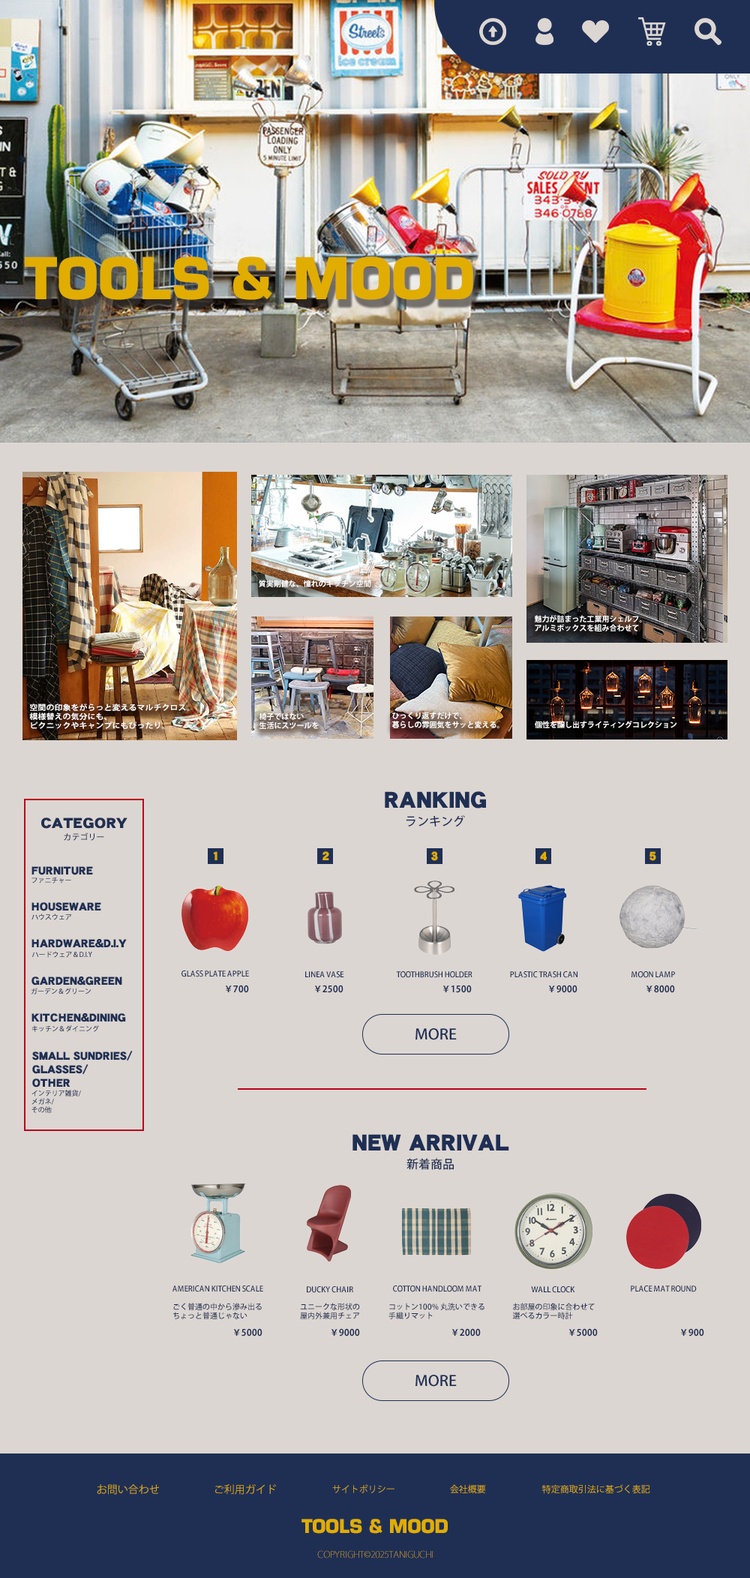
<style>
.page{position:relative;width:750px;height:1578px;background:#dcd6d2}
.page>*{position:absolute;margin:0}
.t1{font:56.3px "Eurostile-Bold";color:#e1ad01;text-transform:uppercase}
.t2{font:7.5px "KozGoPr6N-Bold";color:#ffffff;text-transform:uppercase}
.t3{font:7.5px "KozGoPr6N-Bold";color:#ffffff;text-transform:uppercase;scale:1.09 1}
.t4{font:22.5px "DFGothic-UB-WING-RKSJ-H";color:#1f2f54;text-transform:uppercase}
.t5{font:14.3px "DFGothic-UB-WING-RKSJ-H";color:#212f50;text-transform:uppercase;scale:1.09 1}
.t6{font:12px "KozGoPr6N-Medium";color:#1f2f54;text-transform:uppercase}
.t7{font:8.2px "KozGoPr6N-Medium";color:#1f2f54;text-transform:uppercase}
.t8{font:12px "DFGothic-UB-WING-RKSJ-H";color:#e1ad01;text-transform:uppercase}
.t9{font:11.2px "DFGothic-UB-WING-RKSJ-H";color:#1f2f54;text-transform:uppercase}
.t10{font:6.8px "KozGoPr6N-Medium";color:#1f2f54;text-transform:uppercase}
.t11{font:7.5px "KozGoPr6N-Medium";color:#1f2f54;text-transform:uppercase}
.t12{font:9px "KozGoPr6N-Bold";color:#1f2f54;text-transform:uppercase}
.t13{font:14.5px "KozGoPr6N-Medium";color:#1f2f54;text-transform:uppercase;scale:1.06 1}
.t14{font:10.5px "KozGoPr6N-Regular";color:#e1ad01;text-transform:uppercase}
.t15{font:9px "KozGoPr6N-Regular";color:#e1ad01;text-transform:uppercase}
.t16{font:18.3px "Eurostile-Bold";color:#e1ad01;text-transform:uppercase}
.t17{font:9px "KozGoPr6N-ExtraLight";text-transform:uppercase}
</style>
<div class="page">
<p class="t1" style="left:25px;top:256px;width:448px;height:44px">tools &amp; mood</p>
<p class="t2" style="left:259px;top:580px;width:111px;height:7px">質実剛健な、憧れのキッチン空間</p>
<p class="t2" style="left:535px;top:615px;width:107px;height:17px">魅力が詰まった工業用シェルフ。<br>アルミボックスを組み合わせて</p>
<p class="t3" style="left:29px;top:704px;width:160px;height:25px">空間の印象をがらっと変えるマルチクロス。<br>模様替えの気分にも、<br>ピクニックやキャンプにもぴったり。</p>
<p class="t2" style="left:259px;top:712px;width:60px;height:17px">椅子ではない<br>生活にスツールを</p>
<p class="t2" style="left:392px;top:712px;width:108px;height:17px">ひっくり返すだけで、<br>暮らしの雰囲気をサッと変える。</p>
<p class="t2" style="left:535px;top:721px;width:142px;height:7px">個性を醸し出すライティングコレクション</p>
<p class="t4" style="left:385px;top:791px;width:101px;height:17px">RANKING</p>
<p class="t5" style="left:41px;top:818px;width:87px;height:11px">category</p>
<p class="t6" style="left:406px;top:815px;width:59px;height:12px">ランキング</p>
<p class="t7" style="left:64px;top:832px;width:40px;height:9px">カテゴリー</p>
<p class="t8" style="left:214px;top:851px;width:4px;height:9px">1</p>
<p class="t8" style="left:322px;top:851px;width:7px;height:9px">2</p>
<p class="t8" style="left:431px;top:851px;width:7px;height:10px">3</p>
<p class="t8" style="left:540px;top:851px;width:7px;height:9px">4</p>
<p class="t8" style="left:650px;top:851px;width:6px;height:10px">5</p>
<p class="t9" style="left:32px;top:866px;width:61px;height:9px">furniture</p>
<p class="t10" style="left:32px;top:877px;width:39px;height:7px">ファニチャー</p>
<p class="t9" style="left:32px;top:902px;width:69px;height:9px">HOUSEWARE</p>
<p class="t10" style="left:32px;top:914px;width:40px;height:6px">ハウスウェア</p>
<p class="t9" style="left:32px;top:939px;width:95px;height:9px">HARDWARE&amp;D.I.Y</p>
<p class="t10" style="left:32px;top:951px;width:60px;height:7px">ハードウェア＆D.I.Y</p>
<p class="t9" style="left:32px;top:976px;width:90px;height:10px">GARDEN&amp;GREEN</p>
<p class="t11" style="left:182px;top:970px;width:67px;height:7px">GLASS PLATE APPLE</p>
<p class="t11" style="left:305px;top:971px;width:39px;height:7px">LINEA VASE</p>
<p class="t11" style="left:396px;top:971px;width:76px;height:7px">TOOTHBRUSH HOLDER</p>
<p class="t11" style="left:510px;top:971px;width:68px;height:7px">PLASTIC TRASH CAN</p>
<p class="t11" style="left:632px;top:971px;width:43px;height:7px">MOON LAMP</p>
<p class="t10" style="left:31px;top:988px;width:61px;height:6px">ガーデン＆グリーン</p>
<p class="t12" style="left:225px;top:985px;width:24px;height:8px">￥700</p>
<p class="t12" style="left:314px;top:985px;width:30px;height:8px">￥2500</p>
<p class="t12" style="left:442px;top:985px;width:30px;height:8px">￥1500</p>
<p class="t12" style="left:548px;top:985px;width:30px;height:8px">￥9000</p>
<p class="t12" style="left:646px;top:985px;width:29px;height:8px">￥8000</p>
<p class="t9" style="left:32px;top:1013px;width:94px;height:9px">KITCHEN&amp;DINING</p>
<p class="t10" style="left:32px;top:1025px;width:67px;height:7px">キッチン＆ダイニング</p>
<p class="t13" style="left:416px;top:1028px;width:41px;height:12px">more</p>
<p class="t9" style="left:32px;top:1051px;width:101px;height:37px">SMALL SUNDRIES/<br>GLASSES/<br>OTHER</p>
<p class="t10" style="left:32px;top:1090px;width:49px;height:23px">インテリア雑貨/<br>メガネ/<br>その他</p>
<p class="t4" style="left:352px;top:1134px;width:157px;height:16px">NEW ARRIVAL</p>
<p class="t6" style="left:406px;top:1158px;width:48px;height:12px">新着商品</p>
<p class="t11" style="left:172px;top:1286px;width:91px;height:6px">AMERICAN KITCHEN SCALE</p>
<p class="t11" style="left:307px;top:1286px;width:46px;height:7px">DUCKY CHAIR</p>
<p class="t11" style="left:393px;top:1286px;width:89px;height:6px">COTTON HANDLOOM MAT</p>
<p class="t11" style="left:531px;top:1286px;width:44px;height:7px">WALL CLOCK</p>
<p class="t11" style="left:631px;top:1286px;width:66px;height:6px">PLACE MAT ROUND</p>
<p class="t11" style="left:173px;top:1303px;width:89px;height:16px">ごく普通の中から滲み出る<br>ちょっと普通じゃない</p>
<p class="t11" style="left:300px;top:1303px;width:60px;height:16px">ユニークな形状の<br>屋内外兼用チェア</p>
<p class="t11" style="left:388px;top:1303px;width:96px;height:16px">コットン100% 丸洗いできる<br>手織りマット</p>
<p class="t11" style="left:512px;top:1303px;width:83px;height:16px">お部屋の印象に合わせて<br>選べるカラー時計</p>
<p class="t12" style="left:233px;top:1328px;width:29px;height:8px">￥5000</p>
<p class="t12" style="left:331px;top:1328px;width:29px;height:8px">￥9000</p>
<p class="t12" style="left:452px;top:1328px;width:29px;height:8px">￥2000</p>
<p class="t12" style="left:568px;top:1328px;width:30px;height:8px">￥5000</p>
<p class="t12" style="left:680px;top:1328px;width:24px;height:8px">￥900</p>
<p class="t13" style="left:416px;top:1375px;width:41px;height:12px">more</p>
<p class="t14" style="left:97px;top:1484px;width:62px;height:11px">お問い合わせ</p>
<p class="t14" style="left:215px;top:1484px;width:61px;height:11px">ご利用ガイド</p>
<p class="t15" style="left:332px;top:1484px;width:62px;height:9px">サイトポリシー</p>
<p class="t15" style="left:450px;top:1484px;width:36px;height:10px">会社概要</p>
<p class="t15" style="left:542px;top:1484px;width:108px;height:10px">特定商取引法に基づく表記</p>
<p class="t16" style="left:302px;top:1519px;width:146px;height:15px">tools &amp; mood</p>
<p class="t17" style="left:317px;top:1550px;width:116px;height:8px">copyRIght©2025taniguchi</p>
</div>
